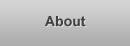
<style>
.page{position:relative;width:130px;height:46px}
.page>*{position:absolute;margin:0}
.t1{font:14px "Arial-BoldMT";color:#403f3f}
</style>
<div class="page">
<p class="t1" style="left:45px;top:16px;width:41px;height:11px">About</p>
</div>
